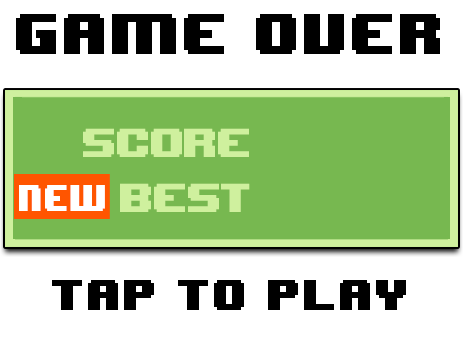
<style>
.page{position:relative;width:463px;height:351px;background:#ffffff}
.page>*{position:absolute;margin:0}
.t1{font:48px "8BITWONDERNominal";color:#000000}
.t2{font:60px "Upheaval -BRK-";color:#cff09e}
.t3{font:30px "8BITWONDERNominal";color:#ffffff;scale:0.86 1}
.t4{font:36px "8BITWONDERNominal";color:#000000}
</style>
<div class="page">
<p class="t1" style="left:16px;top:14px;width:424px;height:40px">GAME OVER</p>
<p class="t2" style="left:83px;top:128px;width:166px;height:29px">Score</p>
<p class="t3" style="left:19px;top:185px;width:86px;height:26px">NEW</p>
<p class="t2" style="left:120px;top:183px;width:130px;height:29px">BEST</p>
<p class="t4" style="left:52px;top:280px;width:354px;height:30px">Tap to Play</p>
</div>
